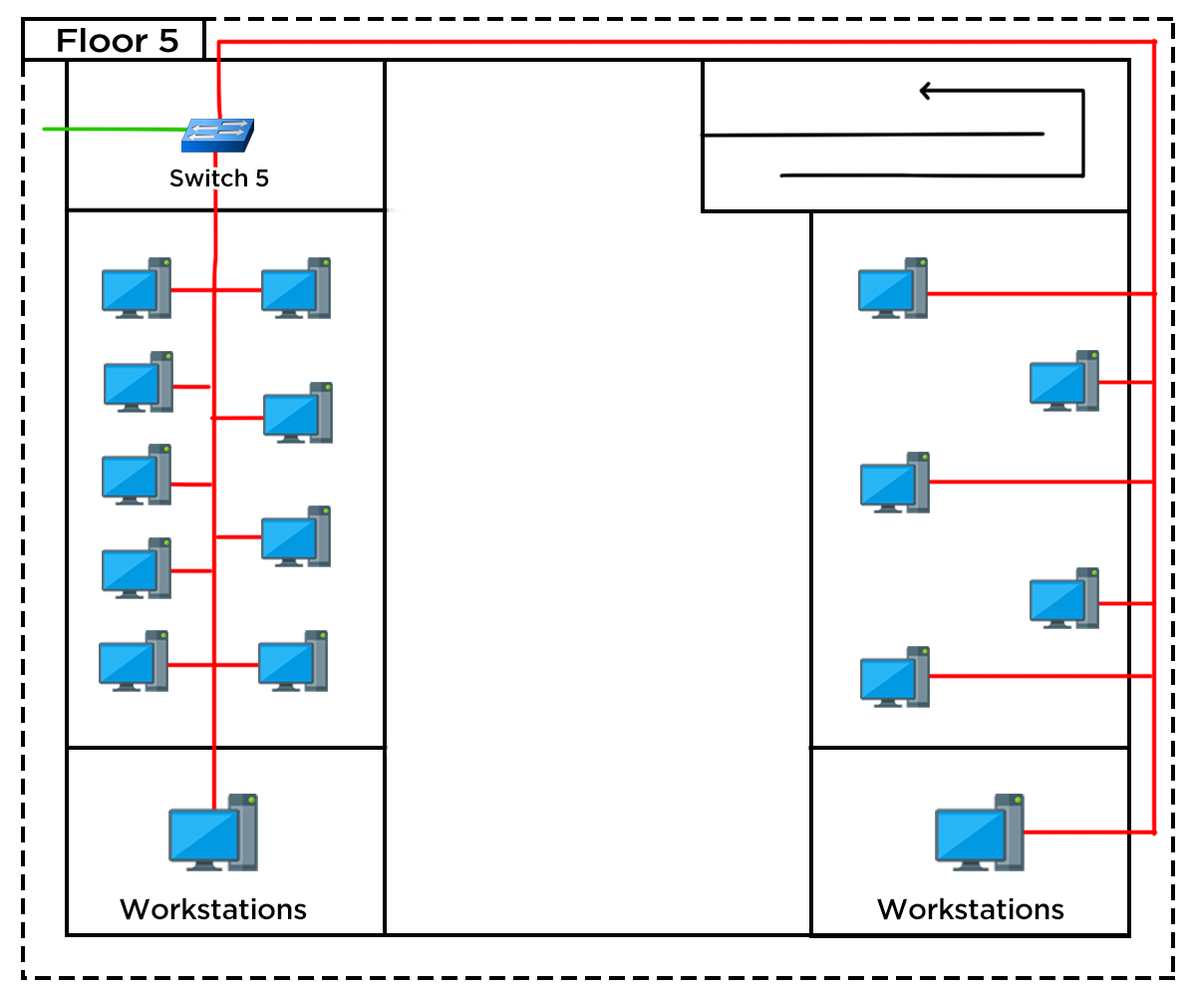
<style>
.page{position:relative;width:1196px;height:997px;background:#ffffff}
.page>*{position:absolute;margin:0}
.t1{font:32.8px "iCielGotham-Medium";letter-spacing:-0.02em;color:#000000;scale:1.1 1}
.t2{font:24.2px "iCielGotham-Medium";letter-spacing:-0.02em;color:#000000}
.t3{font:28.9px "iCielGotham-Medium";letter-spacing:-0.02em;color:#000000}
</style>
<div class="page">
<p class="t1" style="left:58px;top:28px;width:120px;height:25px">Floor 5</p>
<p class="t2" style="left:169px;top:168px;width:100px;height:19px">Switch 5</p>
<p class="t3" style="left:120px;top:897px;width:187px;height:23px">Workstations</p>
<p class="t3" style="left:877px;top:897px;width:188px;height:23px">Workstations</p>
</div>
